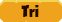
<style>
.page{position:relative;width:62px;height:22px;background:#efa21b}
.page>*{position:absolute;margin:0}
.t1{font:14px "GROBOLD";color:#230b02}
</style>
<div class="page">
<p class="t1" style="left:21px;top:5px;width:18px;height:12px">Tri</p>
</div>
